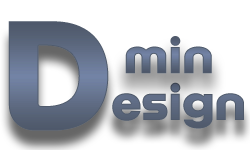
<style>
.page{position:relative;width:250px;height:150px;background:#ffffff}
.page>*{position:absolute;margin:0}
.t1{font:40px "RiaSans-ExtraBold";letter-spacing:-0.025em;color:#5b687e}
.t2{font:43.3px "RiaSans-ExtraBold";letter-spacing:-0.025em;color:#5b687e}
.t3{font:119.4px "RiaSans-ExtraBold";letter-spacing:-0.025em;color:#5b687e}
.t4{font:39.9px "RiaSans-ExtraBold";letter-spacing:-0.025em}
.t5{font:45.2px "RiaSans-ExtraBold";letter-spacing:-0.025em}
</style>
<div class="page">
<p class="t1" style="left:8px;top:21px;width:236px;height:110px"><span class="t2">                 <br></span><span class="t3">D</span>esign</p>
<p class="t4" style="left:125px;top:36px;width:87px;height:38px"><span class="t5">                 </span>min</p>
</div>
